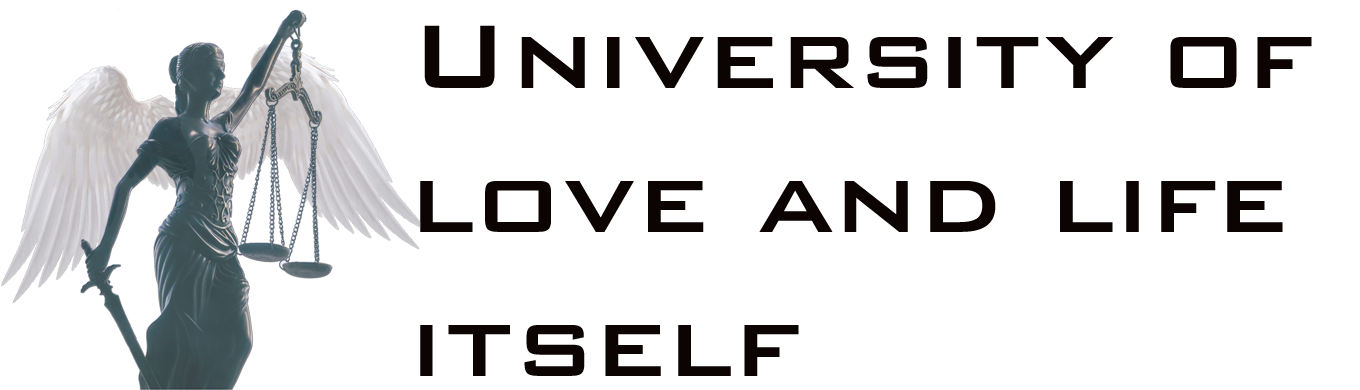
<style>
.page{position:relative;width:1360px;height:390px;background:#ffffff}
.page>*{position:absolute;margin:0}
.t1{font:120px "BankGothicBT-Medium";color:#0c0303}
</style>
<div class="page">
<p class="t1" style="left:420px;top:25px;width:892px;height:351px">University of love and life itself</p>
</div>
